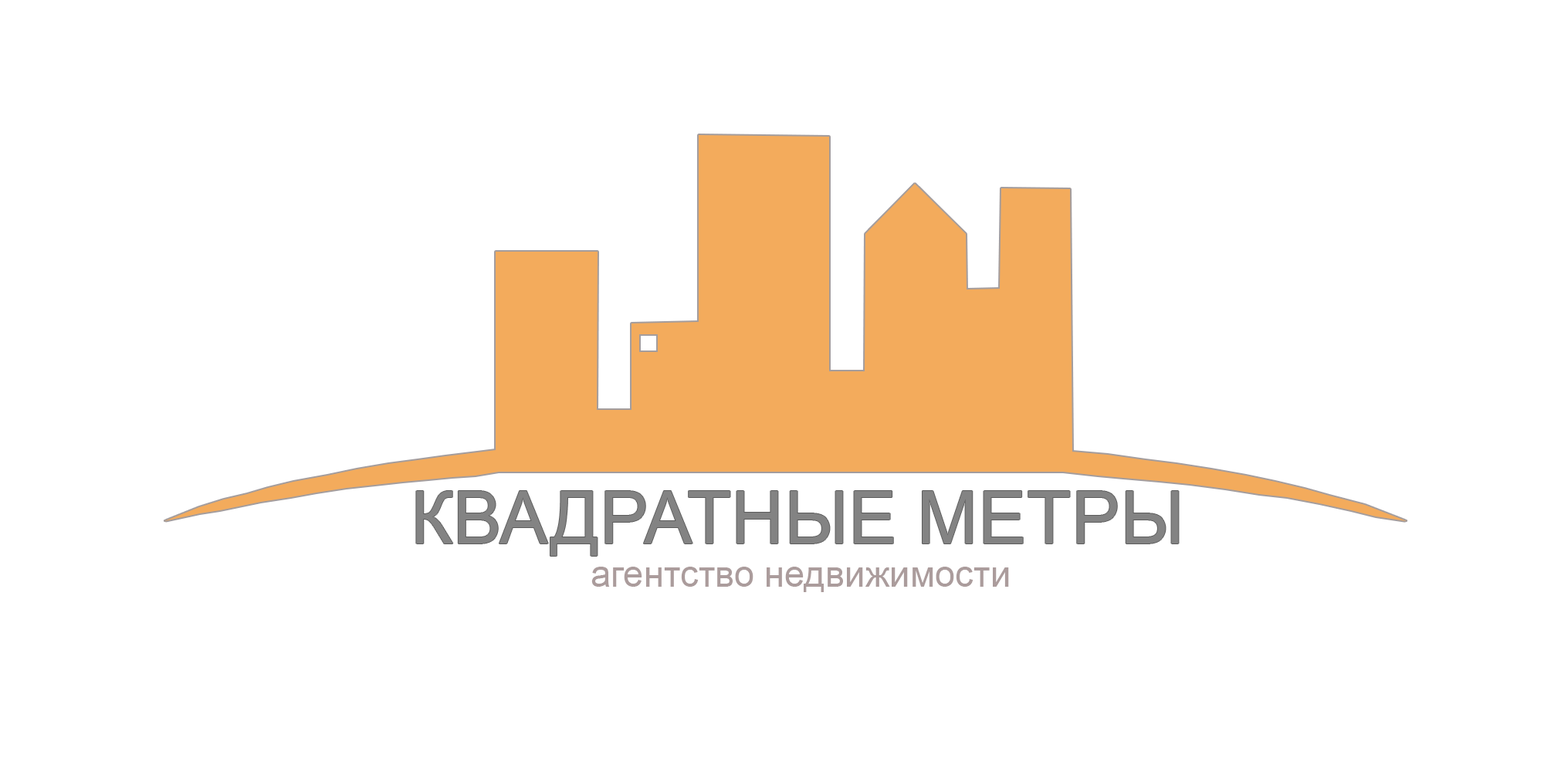
<style>
.page{position:relative;width:1544px;height:772px;background:#ffffff}
.page>*{position:absolute;margin:0}
.t1{font:73px "ArialMT";color:#838383}
.t2{font:36.5px "ArialMT";color:#ab9c9c}
</style>
<div class="page">
<p class="t1" style="left:416px;top:491px;width:763px;height:65px">КВАДРАТНЫЕ МЕТРЫ</p>
<p class="t2" style="left:591px;top:567px;width:418px;height:25px">агентство недвижимости</p>
</div>
